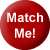
<style>
.page{position:relative;width:50px;height:50px;background:#ffffff}
.page>*{position:absolute;margin:0}
.t1{font:13px "Arial-BoldMT";color:#ffffff}
</style>
<div class="page">
<p class="t1" style="left:7px;top:12px;width:36px;height:26px;text-align:center">Match<br>Me!</p>
</div>
